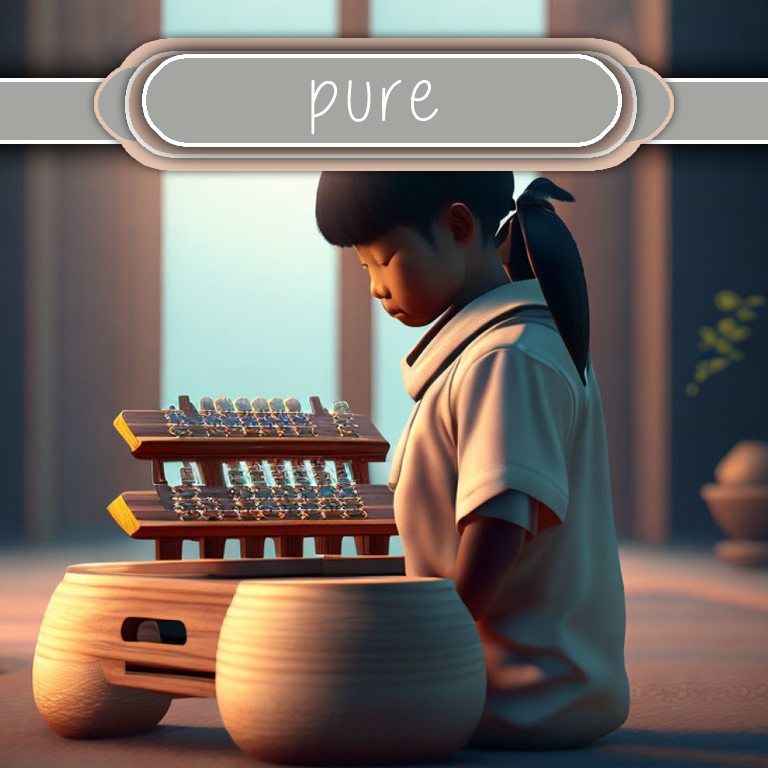
<style>
.page{position:relative;width:768px;height:768px}
.page>*{position:absolute;margin:0}
.t1{font:80px "A-little-sunshine";letter-spacing:0.1em;color:#ffffff}
</style>
<div class="page">
<p class="t1" style="left:311px;top:79px;width:127px;height:56px">pure</p>
</div>
